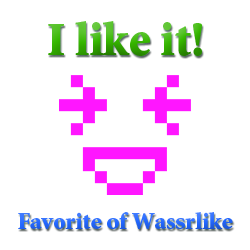
<style>
.page{position:relative;width:250px;height:250px;background:#ffffff}
.page>*{position:absolute;margin:0}
.t1{font:48px "MinionStd-Black"}
.t2{font:24px "MinionStd-Black";color:#2367ff}
</style>
<div class="page">
<p class="t1" style="left:48px;top:21px;width:154px;height:35px">I like it!</p>
<p class="t2" style="left:18px;top:212px;width:215px;height:17px">Favorite of Wassrlike</p>
</div>
